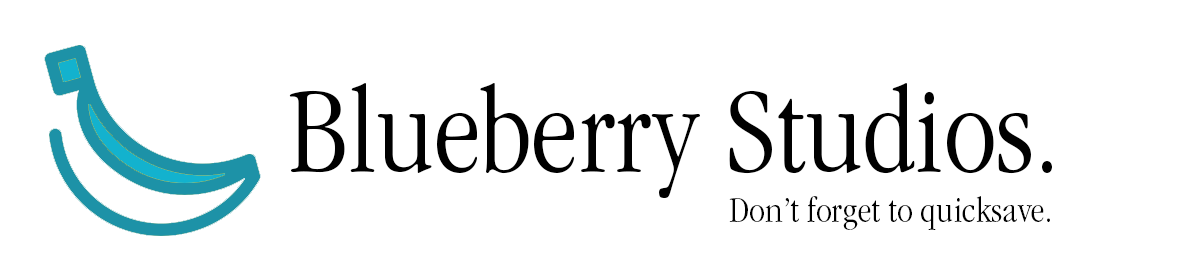
<style>
.page{position:relative;width:1200px;height:280px;background:#ffffff}
.page>*{position:absolute;margin:0}
.t1{font:125px "ITCGaramondStd-LtNarrow";color:#000000}
.t2{font:37.5px "ITCGaramondStd-LtNarrow";color:#000000}
</style>
<div class="page">
<p class="t1" style="left:289px;top:83px;width:763px;height:115px">Blueberry Studios.</p>
<p class="t2" style="left:729px;top:196px;width:321px;height:34px">Don’t forget to quicksave.</p>
</div>
